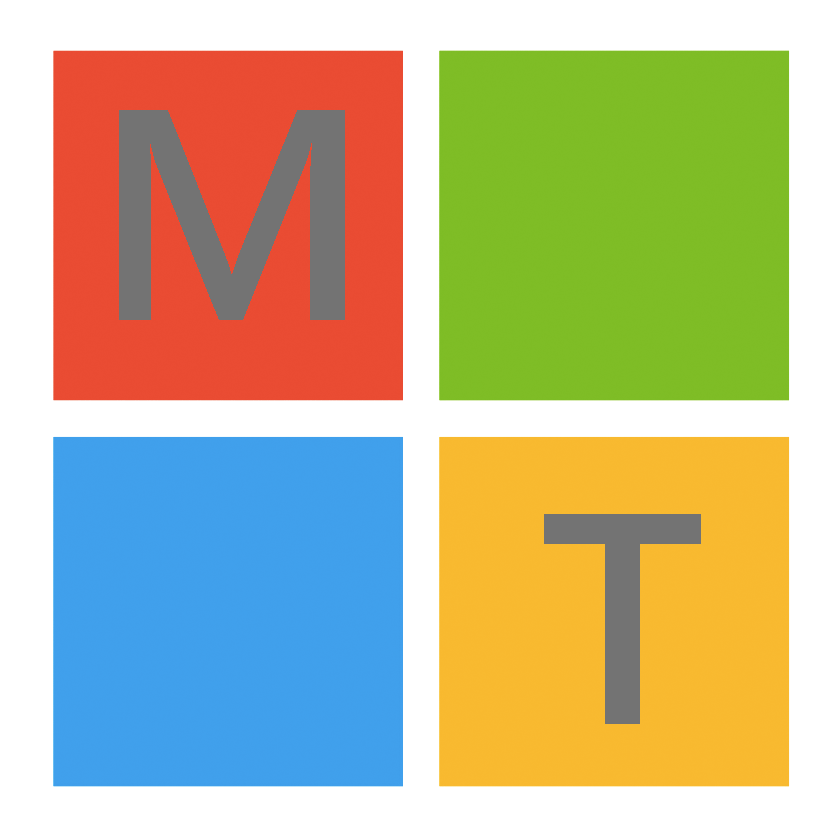
<style>
.page{position:relative;width:838px;height:838px;background:#ffffff}
.page>*{position:absolute;margin:0}
.t1{font:300px "SegoeUI-Semibold";color:#737373}
</style>
<div class="page">
<p class="t1" style="left:119px;top:110px;width:226px;height:210px">M</p>
<p class="t1" style="left:544px;top:514px;width:157px;height:210px">T</p>
</div>
